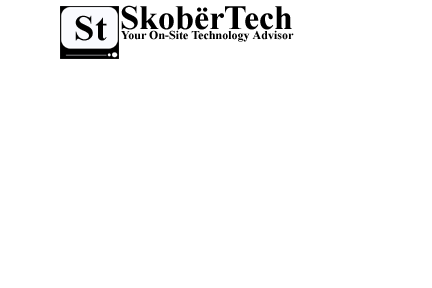
<style>
.page{position:relative;width:432px;height:288px;background:#ffffff}
.page>*{position:absolute;margin:0}
.t1{font:34px "TimesNewRomanPS-BoldMT";color:#000000}
.t2{font:36px "TimesNewRomanPS-BoldMT";color:#000000}
.t3{font:12px "TimesNewRomanPS-BoldMT";color:#000000}
</style>
<div class="page">
<p class="t1" style="left:121px;top:5px;width:171px;height:25px">SkobërTech</p>
<p class="t2" style="left:75px;top:15px;width:32px;height:26px">St</p>
<p class="t3" style="left:121px;top:30px;width:173px;height:12px">Your On-Site Technology Advisor</p>
</div>
